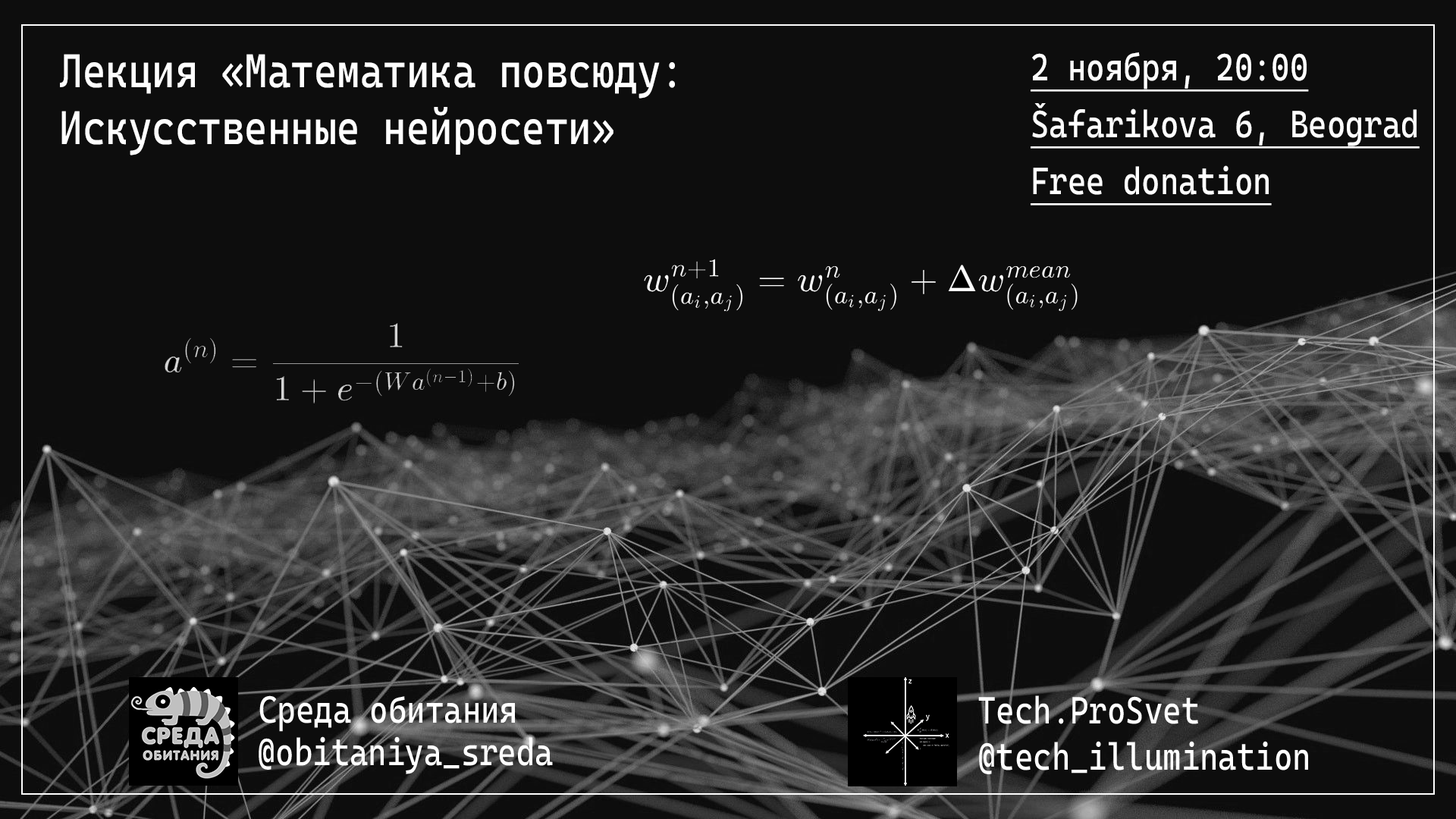
<style>
.page{position:relative;width:1456px;height:819px;background:#0d0d0d}
.page>*{position:absolute;margin:0}
.t1{font:47.4px/56.9px "CascadiaMono-Regular";color:#ffffff;scale:0.83 1}
.t2{font:37.9px/56.9px "CascadiaMono-Regular";color:#ffffff;text-decoration:underline;scale:0.83 1}
.t3{font:37.9px "CascadiaMono-Roman";color:#ffffff;scale:0.83 1}
</style>
<div class="page">
<p class="t1" style="left:60px;top:54px;width:615px;height:101px">Лекция «Математика повсюду:<br>Искусственные нейросети»</p>
<p class="t2" style="left:1031px;top:52px;width:389px;height:154px">2 ноября, 20:00<br>Šafarikova 6, Beograd<br>Free donation</p>
<p class="t3" style="left:259px;top:695px;width:256px;height:37px">Среда обитания</p>
<p class="t3" style="left:978px;top:695px;width:220px;height:29px">Tech.ProSvet</p>
<p class="t3" style="left:259px;top:736px;width:294px;height:38px">@obitaniya_sreda</p>
<p class="t3" style="left:979px;top:741px;width:329px;height:33px">@tech_illumination</p>
</div>
